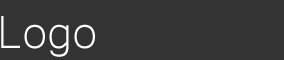
<style>
.page{position:relative;width:284px;height:60px;background:#333333}
.page>*{position:absolute;margin:0}
.t1{font:60px "Microsoft-Yi-Baiti";color:#ffffff}
</style>
<div class="page">
<p class="t1" style="left:1px;top:16px;width:94px;height:41px">Logo</p>
</div>
